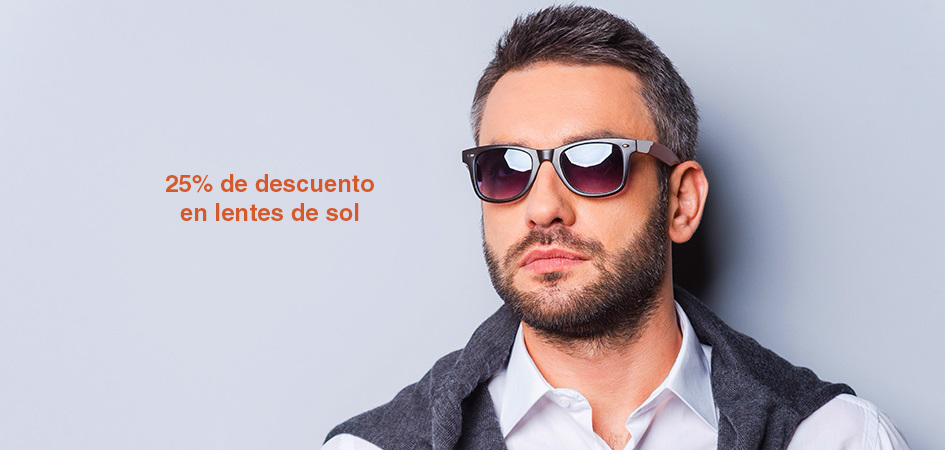
<style>
.page{position:relative;width:945px;height:450px}
.page>*{position:absolute;margin:0}
.t1{font:24px "Helvetica-Bold";color:#d45a2c}
</style>
<div class="page">
<p class="t1" style="left:165px;top:174px;width:209px;height:47px;text-align:center">25% de descuento<br>en lentes de sol</p>
</div>
